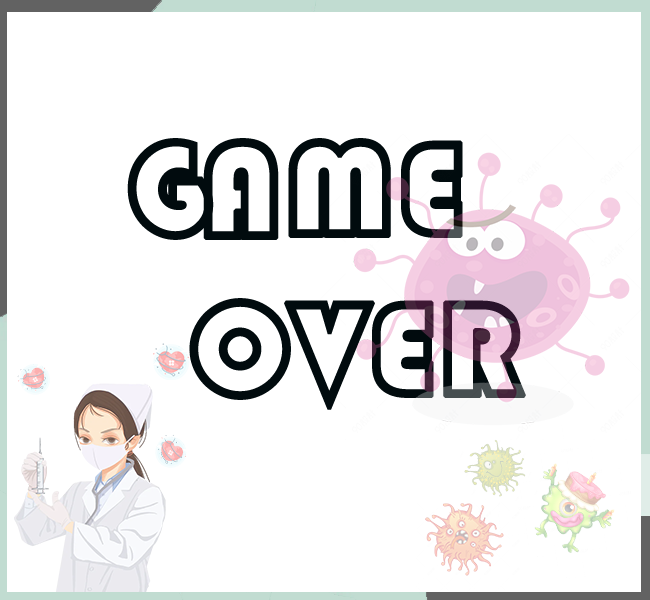
<style>
.page{position:relative;width:650px;height:600px;background:#ffffff}
.page>*{position:absolute;margin:0}
.t1{font:133.3px/160px "STCaiyun";letter-spacing:0.01em;color:#010b0e;text-transform:uppercase;font-weight:bold}
</style>
<div class="page">
<p class="t1" style="left:127px;top:138px;width:399px;height:272px">Game<br>  over</p>
</div>
